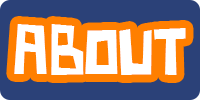
<style>
.page{position:relative;width:200px;height:100px;background:#2b4178}
.page>*{position:absolute;margin:0}
.t1{font:63.8px "PaperCuts2";color:#ffffff}
</style>
<div class="page">
<p class="t1" style="left:14px;top:24px;width:172px;height:51px">ABOUT</p>
</div>
